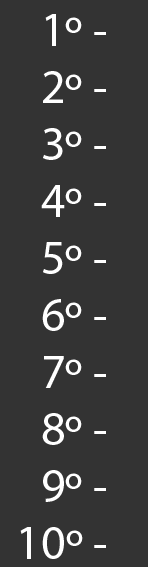
<style>
.page{position:relative;width:148px;height:567px;background:#333333}
.page>*{position:absolute;margin:0}
.t1{font:48px "MyriadPro-Regular";color:#ffffff}
</style>
<div class="page">
<p class="t1" style="left:45px;top:14px;width:61px;height:32px">1º -</p>
<p class="t1" style="left:43px;top:71px;width:63px;height:32px">2º -</p>
<p class="t1" style="left:43px;top:128px;width:63px;height:32px">3º -</p>
<p class="t1" style="left:41px;top:185px;width:65px;height:32px">4º -</p>
<p class="t1" style="left:43px;top:242px;width:63px;height:32px">5º -</p>
<p class="t1" style="left:42px;top:299px;width:64px;height:32px">6º -</p>
<p class="t1" style="left:44px;top:356px;width:62px;height:32px">7º -</p>
<p class="t1" style="left:42px;top:413px;width:64px;height:32px">8º -</p>
<p class="t1" style="left:43px;top:470px;width:63px;height:32px">9º -</p>
<p class="t1" style="left:20px;top:527px;width:86px;height:32px">10º -</p>
</div>
